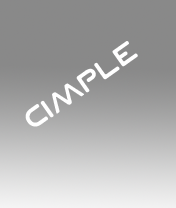
<style>
.page{position:relative;width:176px;height:208px;background:#898989}
.page>*{position:absolute;margin:0}
.t1{font:24px "PlanetNS";color:#ffffff}
</style>
<div class="page">
<p class="t1" style="left:25px;top:41px;width:113px;height:86px;rotate:-35deg">Cimple</p>
</div>
